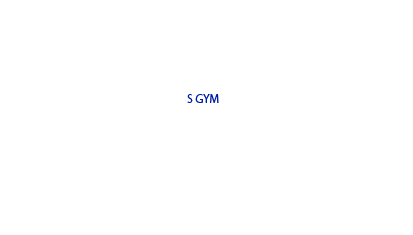
<style>
.page{position:relative;width:413px;height:235px;background:#ffffff}
.page>*{position:absolute;margin:0}
.t1{font:12px "MyriadPro-Regular";color:#0020a9}
</style>
<div class="page">
<p class="t1" style="left:187px;top:94px;width:32px;height:9px">S GYM</p>
</div>
